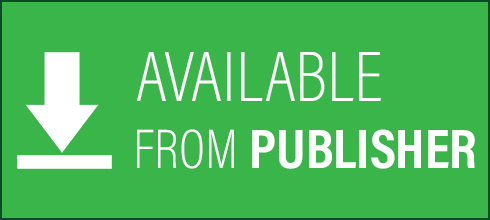
<style>
.page{position:relative;width:490px;height:220px;background:#39b54a}
.page>*{position:absolute;margin:0}
.t1{font:72px "AcuminConcept-CondensedExtraLight";color:#ffffff}
.t2{font:56px "AcuminConcept-CondensedBold";color:#ffffff}
.t3{font:56px "AcuminConcept-CondensedExtraLight";color:#ffffff}
</style>
<div class="page">
<p class="t1" style="left:137px;top:52px;width:244px;height:49px">AVAILABLE</p>
<p class="t2" style="left:137px;top:129px;width:338px;height:40px"><span class="t3">FROM </span>PUBLISHER</p>
</div>
